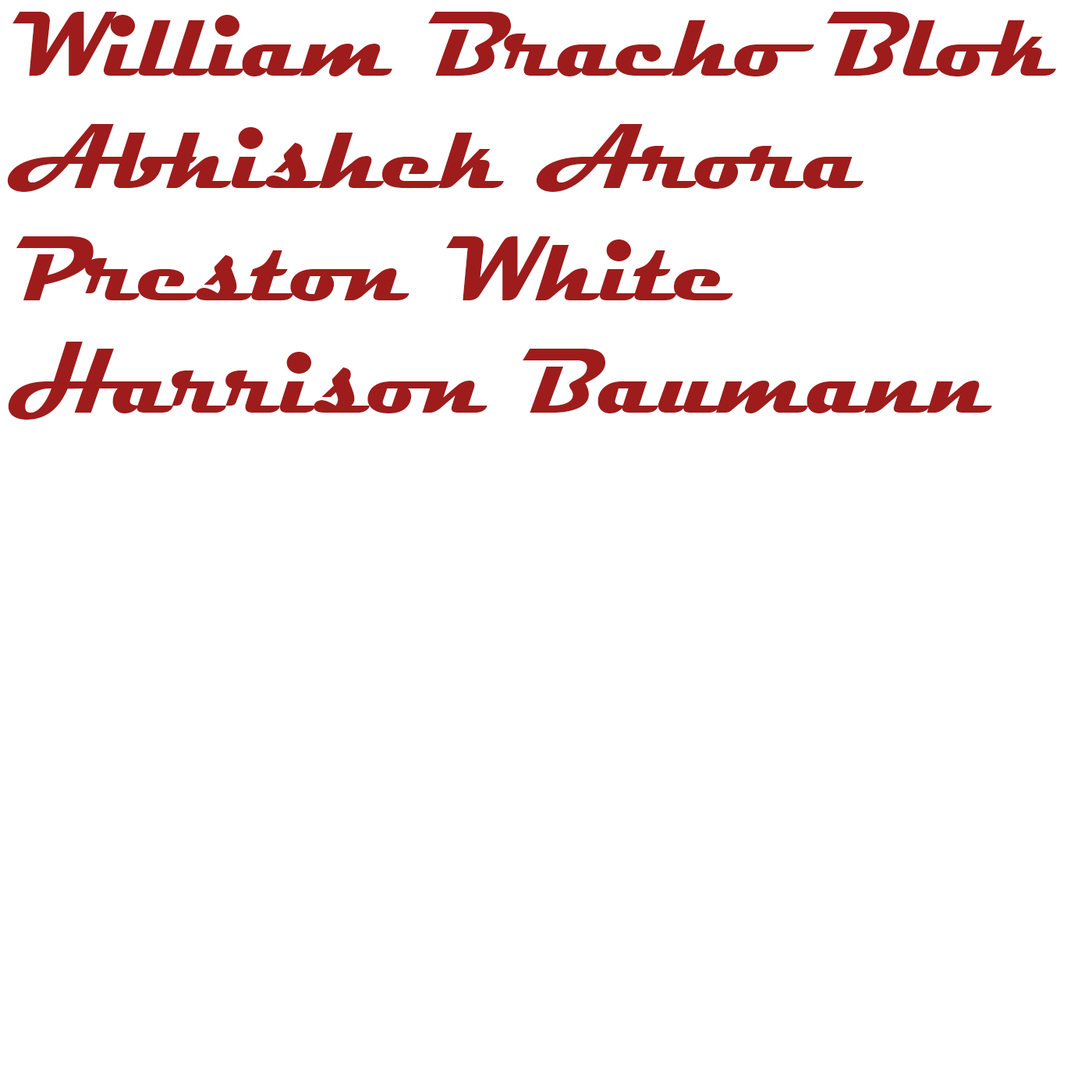
<style>
.page{position:relative;width:1092px;height:1092px;background:#ffffff}
.page>*{position:absolute;margin:0}
.t1{font:93.6px "Magneto-Bold";color:#9e1c1c}
</style>
<div class="page">
<p class="t1" style="left:7px;top:12px;width:1049px;height:408px">William Bracho Blok<br>Abhishek Arora<br>Preston White<br>Harrison Baumann</p>
</div>
